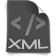
<style>
.page{position:relative;width:56px;height:56px;background:#ffffff}
.page>*{position:absolute;margin:0}
.t1{font:12.9px "PirulenRg-Regular";color:#c2c2c2}
</style>
<div class="page">
<p class="t1" style="left:7px;top:38px;width:42px;height:11px">XML</p>
</div>
